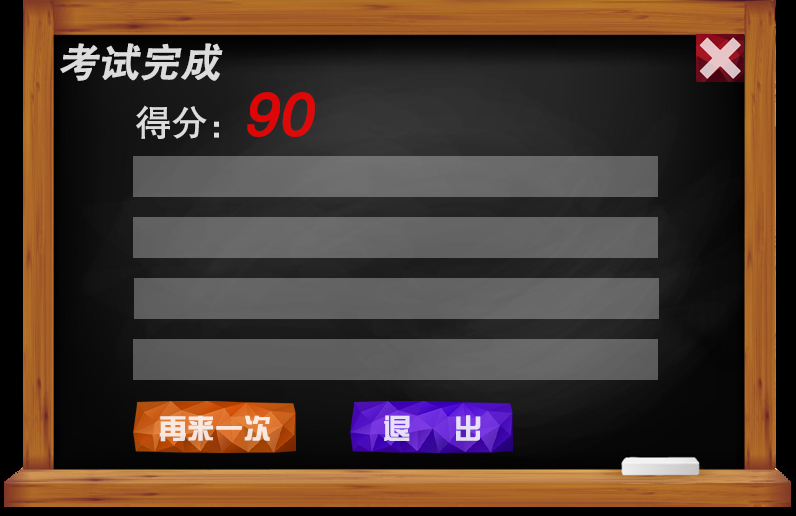
<style>
.page{position:relative;width:796px;height:516px}
.page>*{position:absolute;margin:0}
.t1{font:40px "FZHTJW--GB1-0";color:#dcdcdc;font-weight:bold;font-style:italic}
.t2{font:36px "FZHTJW--GB1-0"}
.t3{font:40px "FZHTJW--GB1-0";font-weight:bold;font-style:italic}
.t4{font:60px "FZHTJW--GB1-0";font-weight:bold;font-style:italic}
.t5{font:28px "BDZYJT--GB1-0";color:#f9e8e1}
.t6{font:28px "BDZYJT--GB1-0";color:#e8e0f9}
</style>
<div class="page">
<p class="t1" style="left:60px;top:43px;width:163px;height:38px">考试完成</p>
<p class="t2" style="left:136px;top:92px;width:179px;height:47px"><span class="t3"><br></span>得分：<span class="t4">90</span></p>
<p class="t5" style="left:159px;top:415px;width:111px;height:27px">再来一次</p>
<p class="t6" style="left:384px;top:415px;width:97px;height:26px">退 出</p>
</div>
